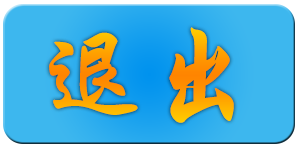
<style>
.page{position:relative;width:300px;height:150px;background:#3db7ee}
.page>*{position:absolute;margin:0}
.t1{font:100.8px "STXingkai"}
</style>
<div class="page">
<p class="t1" style="left:49px;top:27px;width:185px;height:96px">退出</p>
</div>
